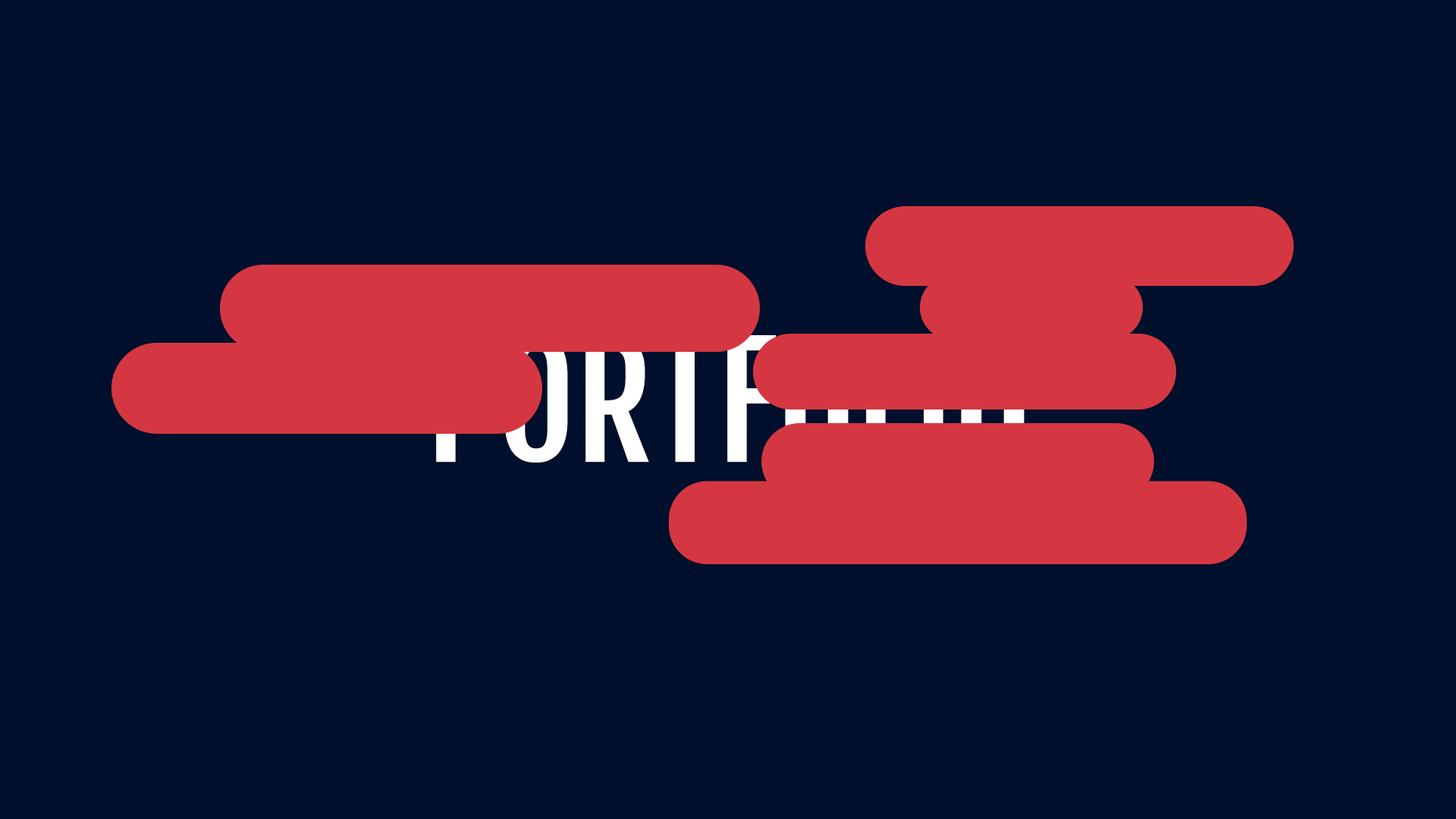
<style>
.page{position:relative;width:1456px;height:819px;background:#000f2b}
.page>*{position:absolute;margin:0}
.t1{font:151.7px "FjallaOne-Regular"}
</style>
<div class="page">
<p class="t1" style="left:436px;top:334px;width:588px;height:129px">PORTFOLIO</p>
</div>
